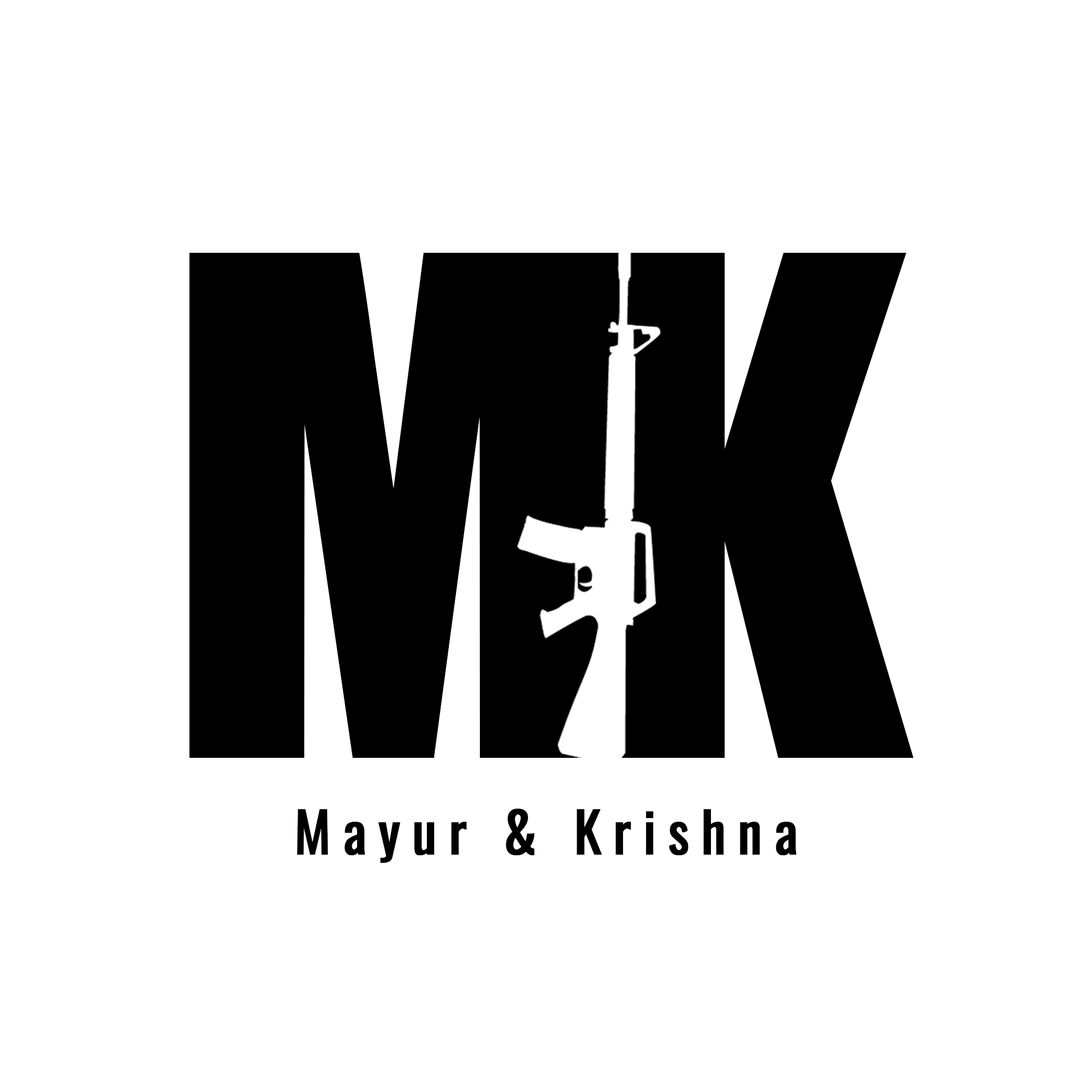
<style>
.page{position:relative;width:1092px;height:1092px;background:#ffffff}
.page>*{position:absolute;margin:0}
.t1{font:639.1px "Impact";letter-spacing:0.06em;color:#000000}
.t2{font:54.6px "Oswald-Regular";letter-spacing:0.2em;color:#000000;font-weight:bold}
</style>
<div class="page">
<p class="t1" style="left:189px;top:253px;width:406px;height:505px">M</p>
<p class="t1" style="left:593px;top:253px;width:320px;height:505px">K</p>
<p class="t2" style="left:297px;top:809px;width:500px;height:54px">Mayur &amp; Krishna</p>
</div>
